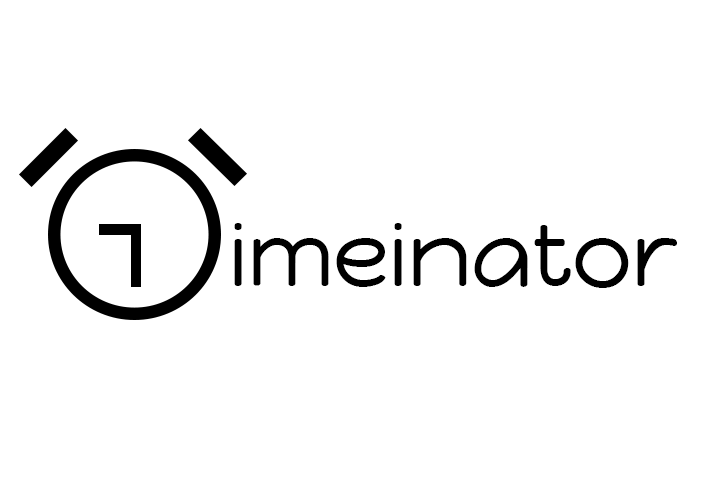
<style>
.page{position:relative;width:720px;height:480px;background:#ffffff}
.page>*{position:absolute;margin:0}
.t1{font:93.9px "HappyMonkey-Regular";color:#000000}
</style>
<div class="page">
<p class="t1" style="left:234px;top:223px;width:443px;height:65px">imeinator</p>
</div>
